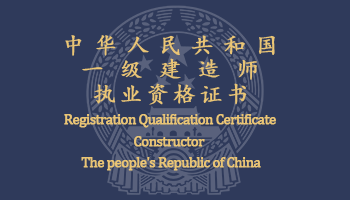
<style>
.page{position:relative;width:350px;height:200px;background:#2f3a5b}
.page>*{position:absolute;margin:0}
.t1{font:22.6px "KaiTi";letter-spacing:0.4em;color:#eac575;font-weight:bold}
.t2{font:22.6px "KaiTi";letter-spacing:0.7em;color:#eac575;font-weight:bold}
.t3{font:22.6px "KaiTi";letter-spacing:0.16em;color:#eac575;font-weight:bold}
.t4{font:15px "Cambria";letter-spacing:-0.06em;color:#eac575;font-weight:bold}
</style>
<div class="page">
<p class="t1" style="left:65px;top:35px;width:210px;height:21px">中华人民共和国</p>
<p class="t2" style="left:82px;top:58px;width:175px;height:22px">一级建造师</p>
<p class="t3" style="left:93px;top:83px;width:154px;height:22px">执业资格证书</p>
<p class="t4" style="left:64px;top:114px;width:212px;height:14px">Registration Qualification Certificate</p>
<p class="t4" style="left:134px;top:136px;width:71px;height:11px">Constructor</p>
<p class="t4" style="left:81px;top:157px;width:180px;height:14px">The people's Republic of China</p>
</div>
